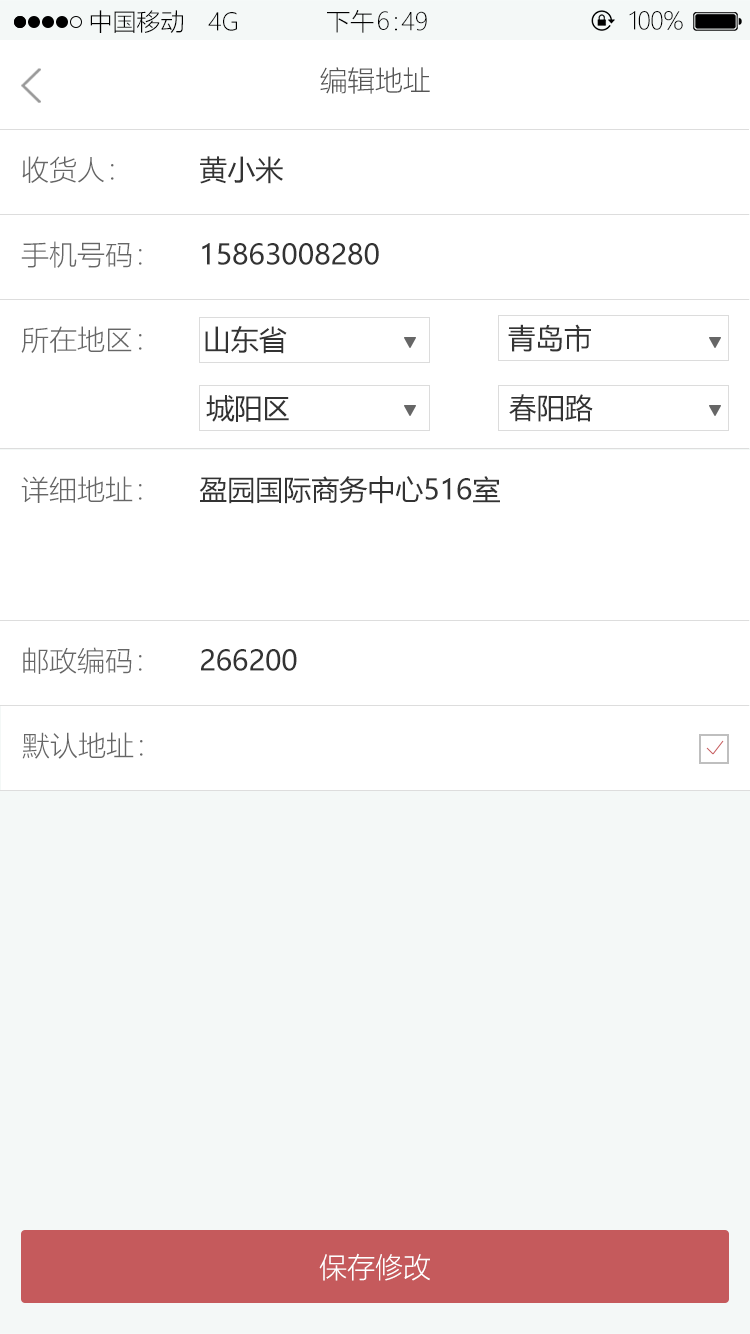
<style>
.page{position:relative;width:750px;height:1334px;background:#ffffff}
.page>*{position:absolute;margin:0}
.t1{font:24px "MicrosoftYaHeiUILight";color:#000000}
.t2{font:28px "MicrosoftYaHeiUILight";color:#555555}
.t3{font:28px "MicrosoftYaHeiUILight";color:#666666}
.t4{font:28px "MicrosoftYaHeiUI";color:#333333}
.t5{font:28px "MicrosoftYaHeiUILight";color:#ffffff}
</style>
<div class="page">
<p class="t1" style="left:90px;top:10px;width:93px;height:23px">中国移动</p>
<p class="t1" style="left:208px;top:12px;width:29px;height:19px">4G</p>
<p class="t1" style="left:327px;top:10px;width:47px;height:23px">下午</p>
<p class="t1" style="left:378px;top:11px;width:11px;height:19px">6</p>
<p class="t1" style="left:395px;top:17px;width:2px;height:14px">：</p>
<p class="t1" style="left:401px;top:11px;width:26px;height:20px">49</p>
<p class="t1" style="left:629px;top:11px;width:54px;height:19px">100%</p>
<p class="t2" style="left:320px;top:67px;width:110px;height:27px">编辑地址</p>
<p class="t3" style="left:22px;top:156px;width:92px;height:27px">收货人：</p>
<p class="t4" style="left:200px;top:156px;width:83px;height:28px">黄小米</p>
<p class="t3" style="left:21px;top:241px;width:121px;height:27px">手机号码：</p>
<p class="t4" style="left:202px;top:243px;width:177px;height:22px">15863008280</p>
<p class="t3" style="left:21px;top:326px;width:121px;height:27px">所在地区：</p>
<p class="t4" style="left:205px;top:326px;width:82px;height:28px">山东省</p>
<p class="t4" style="left:508px;top:324px;width:83px;height:28px">青岛市</p>
<p class="t4" style="left:206px;top:395px;width:83px;height:27px">城阳区</p>
<p class="t4" style="left:509px;top:394px;width:84px;height:28px">春阳路</p>
<p class="t3" style="left:21px;top:476px;width:121px;height:27px">详细地址：</p>
<p class="t4" style="left:199px;top:476px;width:301px;height:28px">盈园国际商务中心516室</p>
<p class="t3" style="left:23px;top:647px;width:119px;height:27px">邮政编码：</p>
<p class="t4" style="left:201px;top:649px;width:96px;height:22px">266200</p>
<p class="t3" style="left:22px;top:732px;width:121px;height:27px">默认地址：</p>
<p class="t5" style="left:319px;top:1253px;width:111px;height:28px">保存修改</p>
</div>
